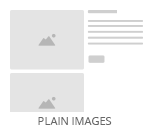
<style>
.page{position:relative;width:150px;height:130px;background:#ffffff}
.page>*{position:absolute;margin:0}
.t1{font:11px "OpenSans";color:#686868;text-transform:uppercase}
</style>
<div class="page">
<p class="t1" style="left:38px;top:117px;width:74px;height:8px">Plain Images</p>
</div>
